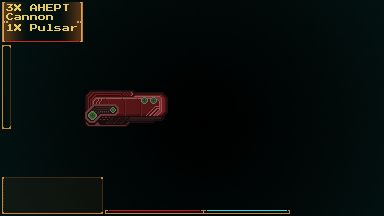
<style>
.page{position:relative;width:384px;height:216px}
.page>*{position:absolute;margin:0}
.t1{font:8px "PressStart2P";color:#e7cb5b}
</style>
<div class="page">
<p class="t1" style="left:6px;top:4px;width:63px;height:16px">3X AHEPT <br>Cannon</p>
<p class="t1" style="left:7px;top:24px;width:70px;height:7px">1X Pulsar</p>
</div>
